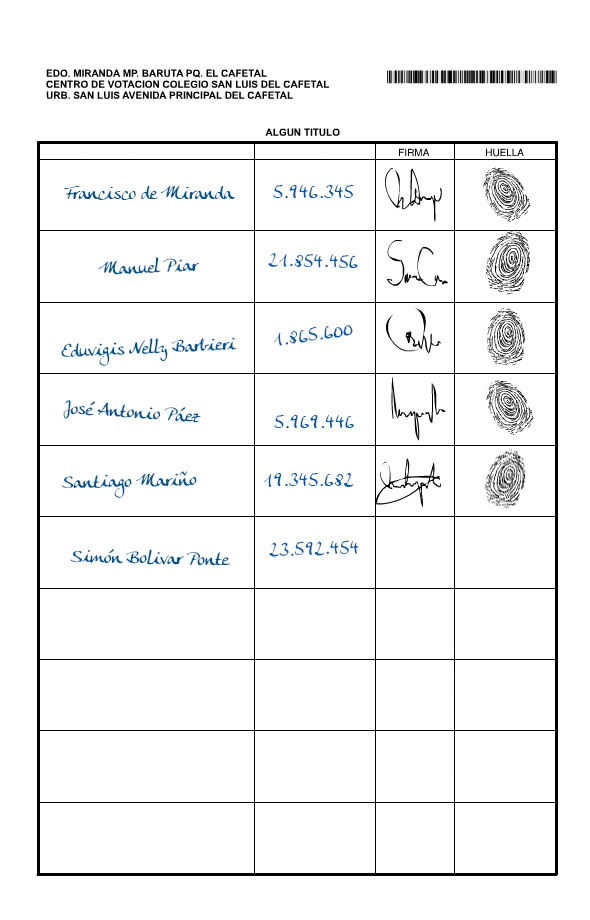
<style>
.page{position:relative;width:590px;height:920px;background:#ffffff}
.page>*{position:absolute;margin:0}
.t1{font:18px "AnkeCalligraphicFG";color:#005aa6}
.t2{font:18px "AnkeCalligraphicFG";color:#00568c}
</style>
<div class="page">
<p class="t1" style="left:273px;top:185px;width:81px;height:13px">5.946.345</p>
<p class="t2" style="left:64px;top:186px;width:171px;height:14px">Francisco de Miranda</p>
<p class="t2" style="left:98px;top:257px;width:101px;height:18px;rotate:-3deg">Manuel Piar</p>
<p class="t1" style="left:268px;top:253px;width:90px;height:16px;rotate:2deg">21.854.456</p>
<p class="t1" style="left:274px;top:325px;width:79px;height:21px;rotate:-8deg">1.865.600</p>
<p class="t2" style="left:61px;top:337px;width:176px;height:29px;rotate:-2deg">Eduvigis Nelly Barbieri</p>
<p class="t2" style="left:63px;top:400px;width:138px;height:23px;rotate:4deg">José Antonio Páez</p>
<p class="t1" style="left:274px;top:415px;width:80px;height:13px">5.969.446</p>
<p class="t2" style="left:62px;top:471px;width:135px;height:27px;rotate:-1deg">Santiago Mariño</p>
<p class="t1" style="left:264px;top:473px;width:90px;height:14px">19.345.682</p>
<p class="t1" style="left:269px;top:540px;width:90px;height:17px;rotate:-2deg">23.592.454</p>
<p class="t2" style="left:70px;top:549px;width:160px;height:17px;rotate:1deg">Simón Bolivar Ponte</p>
</div>
